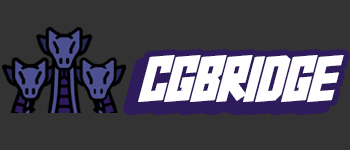
<style>
.page{position:relative;width:350px;height:150px;background:#333333}
.page>*{position:absolute;margin:0}
.t1{font:42.1px "SuperSquad-Italic";color:#ffffff}
</style>
<div class="page">
<p class="t1" style="left:138px;top:55px;width:206px;height:47px">CGBRIDGE</p>
</div>
